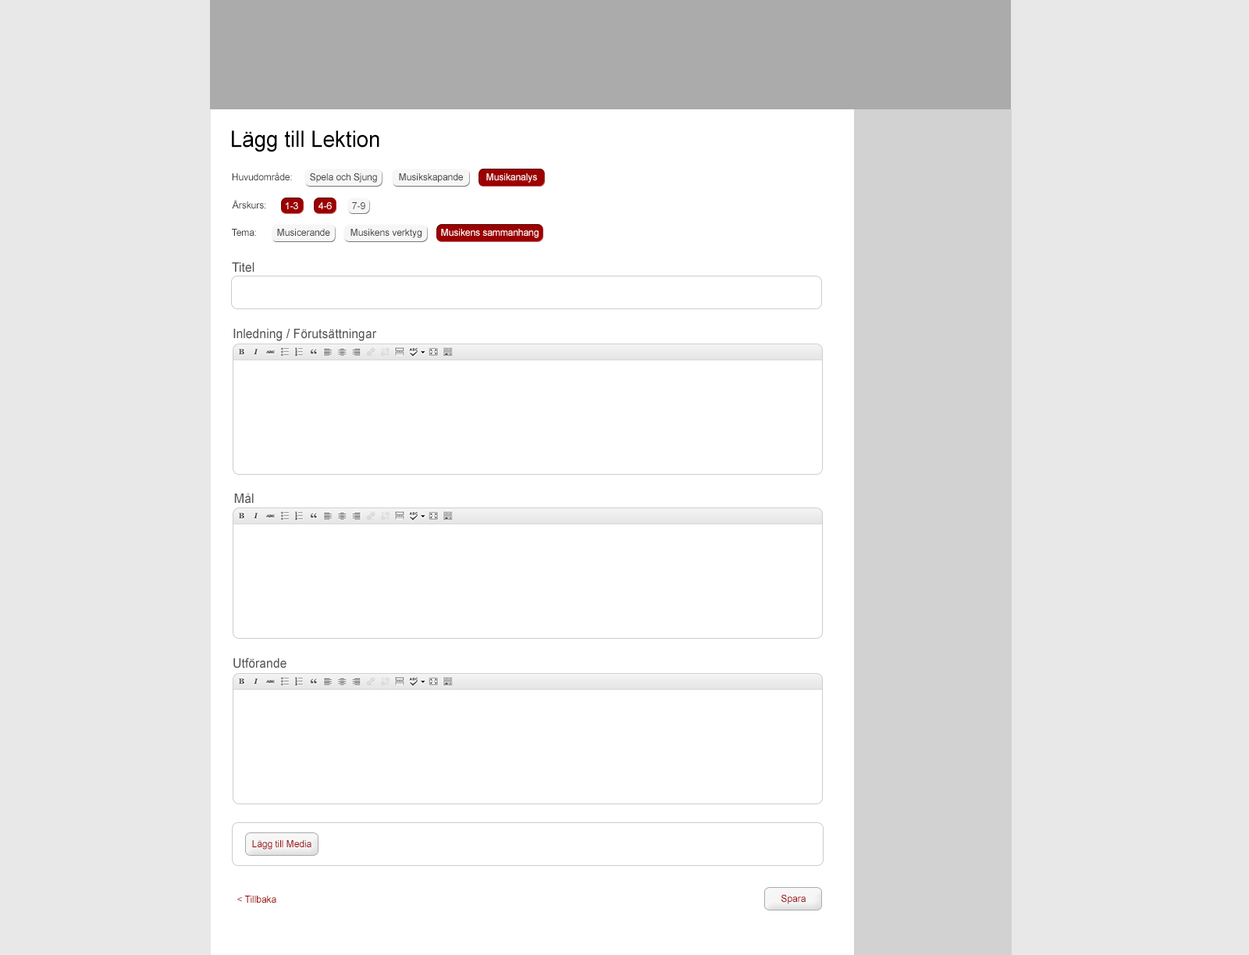
<style>
.page{position:relative;width:1249px;height:955px;background:#ffffff}
.page>*{position:absolute;margin:0}
.t1{font:22.8px "ArialMT";color:#000000;scale:0.95 1}
.t2{font:9.8px "ArialMT";color:#3e3e3e;scale:0.95 1}
.t3{font:9.8px "ArialMT";color:#ffffff;scale:0.95 1}
.t4{font:13px "ArialMT";color:#575757;scale:0.95 1}
.t5{font:9.8px "ArialMT";color:#9c0000;scale:0.95 1}
</style>
<div class="page">
<p class="t1" style="left:232px;top:130px;width:147px;height:22px">Lägg till Lektion</p>
<p class="t2" style="left:232px;top:173px;width:60px;height:7px">Huvudområde:</p>
<p class="t2" style="left:310px;top:173px;width:67px;height:10px">Spela och Sjung</p>
<p class="t2" style="left:399px;top:173px;width:64px;height:10px">Musikskapande</p>
<p class="t3" style="left:486px;top:173px;width:51px;height:10px">Musikanalys</p>
<p class="t2" style="left:232px;top:200px;width:33px;height:8px">Årskurs:</p>
<p class="t3" style="left:286px;top:202px;width:12px;height:7px">1-3</p>
<p class="t3" style="left:318px;top:202px;width:14px;height:7px">4-6</p>
<p class="t2" style="left:352px;top:202px;width:13px;height:7px">7-9</p>
<p class="t2" style="left:232px;top:229px;width:24px;height:7px">Tema:</p>
<p class="t2" style="left:277px;top:229px;width:53px;height:7px">Musicerande</p>
<p class="t2" style="left:351px;top:229px;width:71px;height:9px">Musikens verktyg</p>
<p class="t3" style="left:441px;top:229px;width:98px;height:9px">Musikens sammanhang</p>
<p class="t4" style="left:232px;top:262px;width:22px;height:10px">Titel</p>
<p class="t4" style="left:233px;top:329px;width:144px;height:12px">Inledning / Förutsättningar</p>
<p class="t4" style="left:234px;top:493px;width:20px;height:11px">Mål</p>
<p class="t4" style="left:233px;top:657px;width:53px;height:11px">Utförande</p>
<p class="t5" style="left:252px;top:840px;width:59px;height:9px">Lägg till Media</p>
<p class="t5" style="left:781px;top:894px;width:25px;height:10px">Spara</p>
<p class="t5" style="left:237px;top:895px;width:39px;height:7px">&lt; Tillbaka</p>
</div>
